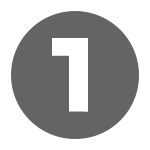
<style>
.page{position:relative;width:150px;height:150px;background:#ffffff}
.page>*{position:absolute;margin:0}
.t1{font:90px "NewRodinProN-UB";color:#ffffff}
</style>
<div class="page">
<p class="t1" style="left:52px;top:38px;width:36px;height:74px">1</p>
</div>
